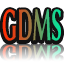
<style>
.page{position:relative;width:64px;height:64px;background:#121212}
.page>*{position:absolute;margin:0}
.t1{font:46.6px "LinBiolinumB";scale:0.43 1}
</style>
<div class="page">
<p class="t1" style="left:2px;top:9px;width:59px;height:32px">GDMS</p>
</div>
